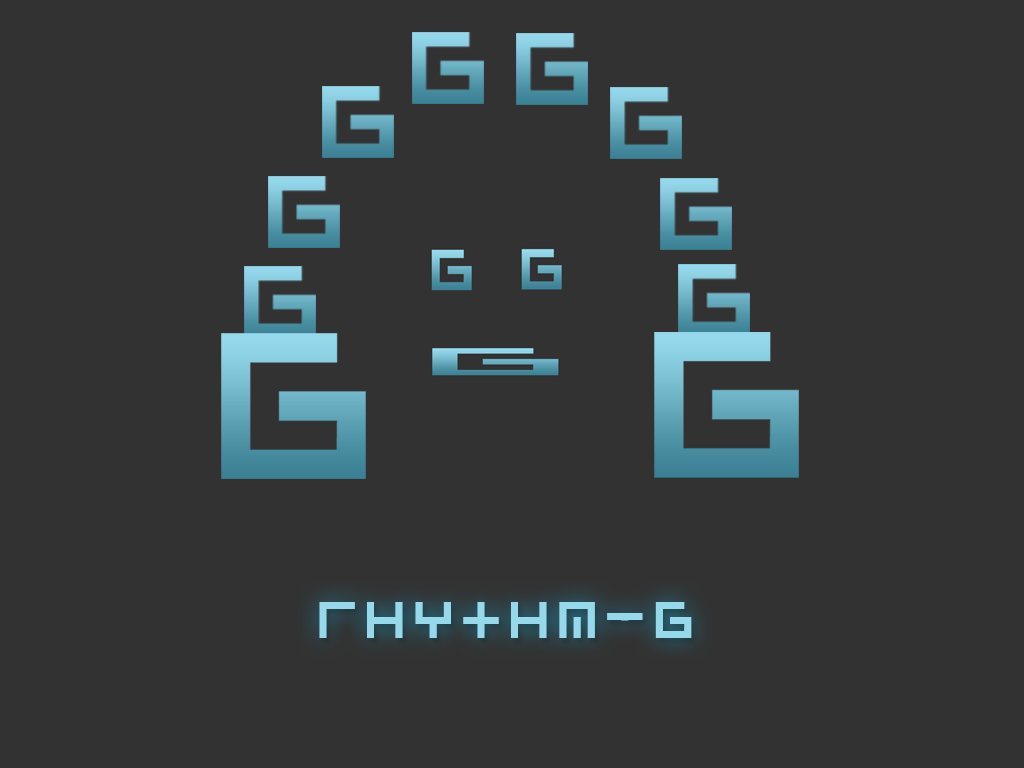
<style>
.page{position:relative;width:1024px;height:768px;background:#323232}
.page>*{position:absolute;margin:0}
.t1{font:70.8px "Beatbox";color:#95d9eb}
</style>
<div class="page">
<p class="t1" style="left:319px;top:602px;width:373px;height:36px">rHYTHM-G</p>
</div>
